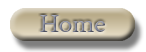
<style>
.page{position:relative;width:146px;height:52px;background:#ffffff}
.page>*{position:absolute;margin:0}
.t1{font:26.4px "AdobeDevanagari-Regular";color:#808498;scale:1.1 1}
</style>
<div class="page">
<p class="t1" style="left:40px;top:15px;width:65px;height:17px">Home</p>
</div>
